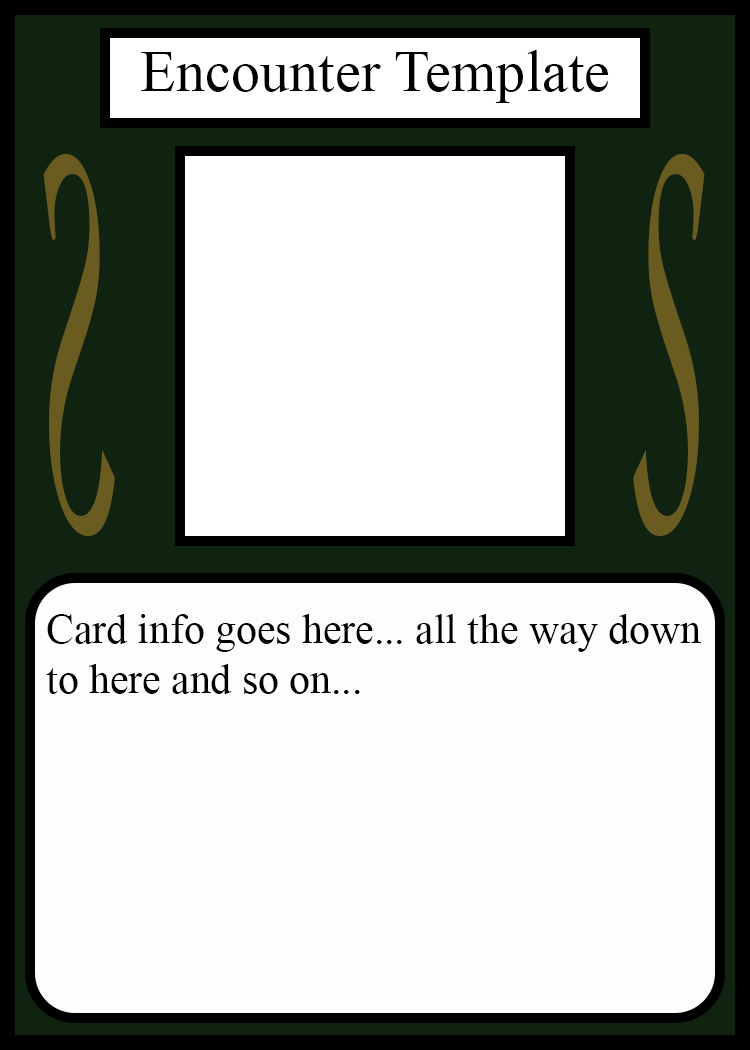
<style>
.page{position:relative;width:750px;height:1050px;background:#fffcfc}
.page>*{position:absolute;margin:0}
.t1{font:58.3px "TimesNewRomanPSMT";color:#010101}
.t2{font:548.5px "Apple-Chancery";color:#6a5c21;scale:0.27 1}
.t3{font:548.2px "Apple-Chancery";color:#6a5c21;scale:0.27 1}
.t4{font:41.7px "TimesNewRomanPSMT";color:#000000}
</style>
<div class="page">
<p class="t1" style="left:141px;top:50px;width:468px;height:53px">Encounter Template</p>
<p class="t2" style="left:43px;top:154px;width:72px;height:382px;rotate:180deg">S</p>
<p class="t3" style="left:633px;top:154px;width:72px;height:382px">S</p>
<p class="t4" style="left:46px;top:614px;width:655px;height:80px">Card info goes here... all the way down<br>to here and so on...</p>
</div>
